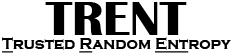
<style>
.page{position:relative;width:233px;height:55px;background:#ffffff}
.page>*{position:absolute;margin:0}
.t1{font:50px "BritannicBold";color:#000000}
.t2{font:16px "CopperplateGothic-Bold";color:#000000}
.t3{font:16px "CopperplateGothic-Bold";color:#000000;text-decoration:underline}
</style>
<div class="page">
<p class="t1" style="left:45px;top:2px;width:142px;height:33px">TRENT</p>
<p class="t2" style="left:2px;top:37px;width:229px;height:16px"><span class="t3">T</span>rusted <span class="t3">R</span>andom <span class="t3">Ent</span>ropy</p>
</div>
